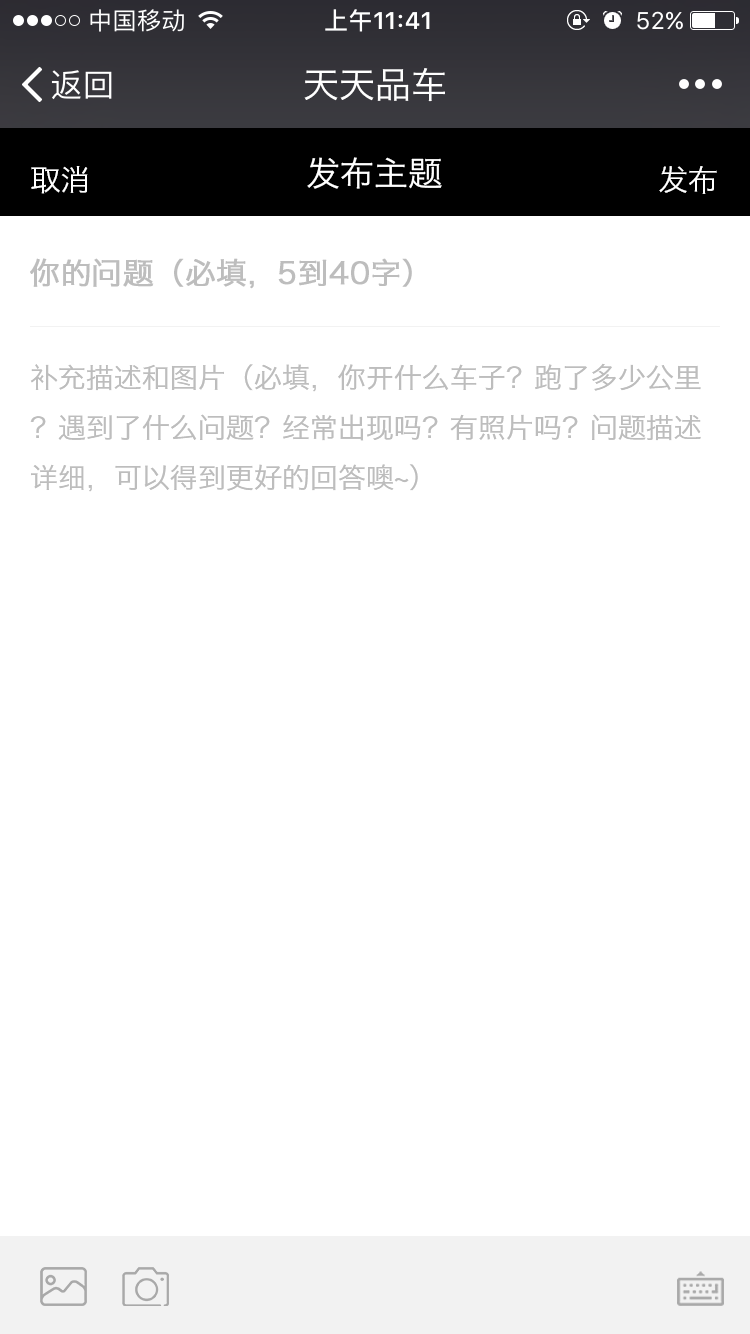
<style>
.page{position:relative;width:750px;height:1334px;background:#ffffff}
.page>*{position:absolute;margin:0}
.t1{font:36px "HiraginoSansGB-W3";color:#ffffff}
.t2{font:34px "HiraginoSansGB-W3";color:#ffffff}
.t3{font:30px "HiraginoSansGB-W3";color:#ffffff}
.t4{font:30px "HiraginoSansGB-W3";color:#bdbdbd;font-weight:bold}
.t5{font:28px/50px "HiraginoSansGB-W3";color:#bdbdbd}
</style>
<div class="page">
<p class="t1" style="left:304px;top:68px;width:141px;height:34px">天天品车</p>
<p class="t2" style="left:307px;top:157px;width:135px;height:32px">发布主题</p>
<p class="t3" style="left:31px;top:166px;width:57px;height:28px">取消</p>
<p class="t3" style="left:659px;top:166px;width:58px;height:28px">发布</p>
<p class="t4" style="left:30px;top:258px;width:382px;height:31px">你的问题（必填，5到40字）</p>
<p class="t5" style="left:30px;top:363px;width:671px;height:129px">补充描述和图片（必填，你开什么车子？跑了多少公里？遇到了什么问题？经常出现吗？有照片吗？问题描述详细，可以得到更好的回答噢~）</p>
</div>
